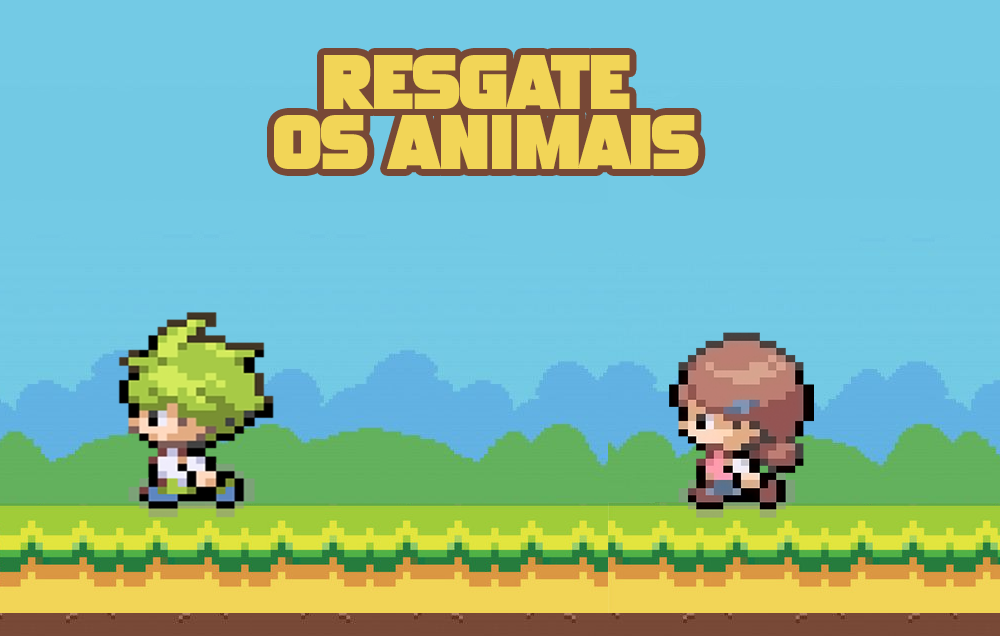
<style>
.page{position:relative;width:1000px;height:636px;background:#73cae5}
.page>*{position:absolute;margin:0}
.t1{font:79px/60px "MonsterBites";letter-spacing:-0.02em;color:#f2d557}
</style>
<div class="page">
<p class="t1" style="left:274px;top:55px;width:425px;height:114px;text-align:center">RESGATE <br>OS ANIMAIS</p>
</div>
